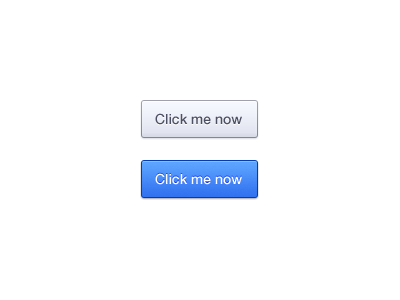
<style>
.page{position:relative;width:400px;height:300px;background:#ffffff}
.page>*{position:absolute;margin:0}
.t1{font:14px "HelveticaNeue-Medium";color:#4d5062}
.t2{font:14px "HelveticaNeue-Medium";color:#ffffff}
</style>
<div class="page">
<p class="t1" style="left:155px;top:113px;width:87px;height:12px">Click me now</p>
<p class="t2" style="left:155px;top:173px;width:87px;height:12px">Click me now</p>
</div>
